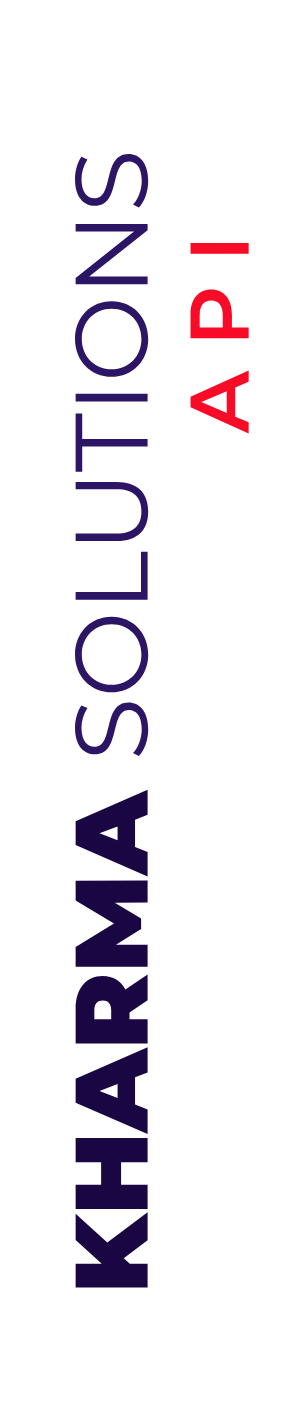
<style>
.page{position:relative;width:286px;height:1416px;background:#ffffff}
.page>*{position:absolute;margin:0}
.t1{font:102.8px "Montserrat-Regular";color:#2d1565;text-transform:uppercase}
.t2{font:102.8px "Montserrat-Black";color:#190643;text-transform:uppercase}
.t3{font:83px "Montserrat-SemiBold";letter-spacing:0.3em;color:#f70b27;text-transform:uppercase}
</style>
<div class="page">
<p class="t1" style="left:75px;top:153px;width:74px;height:1135px;rotate:-90deg"><span class="t2">KHARMA </span>SOLUTIONS</p>
<p class="t3" style="left:190px;top:243px;width:59px;height:191px;rotate:-90deg">API</p>
</div>
